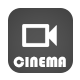
<style>
.page{position:relative;width:80px;height:80px;background:#ffffff}
.page>*{position:absolute;margin:0}
.t1{font:15px "Bauhaus93";color:#ffffff}
</style>
<div class="page">
<p class="t1" style="left:13px;top:56px;width:53px;height:12px">CINEMA</p>
</div>
